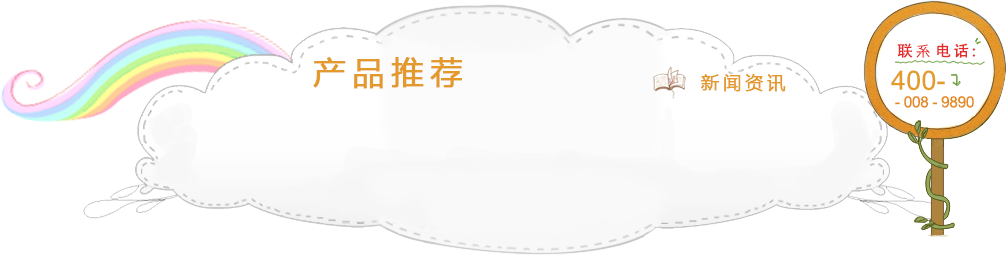
<style>
.page{position:relative;width:1007px;height:255px;background:#ffffff}
.page>*{position:absolute;margin:0}
.t1{font:15.5px/17.7px "DokChampa";letter-spacing:-0.025em;color:#e5891c}
.t2{font:15.5px/26.5px "AdobeHeitiStd-Regular";letter-spacing:-0.025em;color:#e32c2c}
.t3{font:15.5px/26.5px "Gulim";letter-spacing:-0.025em;color:#e32c2c}
.t4{font:26.5px/33.1px "DokChampa";letter-spacing:0.015em;color:#e39b2a}
.t5{font:32px "MicrosoftYaHei";letter-spacing:0.2em;color:#e3992c;font-weight:bold}
.t6{font:18px "MicrosoftYaHei";letter-spacing:0.2em;color:#e3992c;font-weight:bold}
</style>
<div class="page">
<p class="t1" style="left:891px;top:43px;width:85px;height:65px"><span class="t2">  联 </span><span class="t3">系 </span><span class="t2">电 话 :<br></span><span class="t4">400-<br></span> - 008 - 9890</p>
<p class="t5" style="left:313px;top:57px;width:149px;height:32px">产品推荐</p>
<p class="t6" style="left:701px;top:74px;width:85px;height:18px">新闻资讯</p>
</div>
